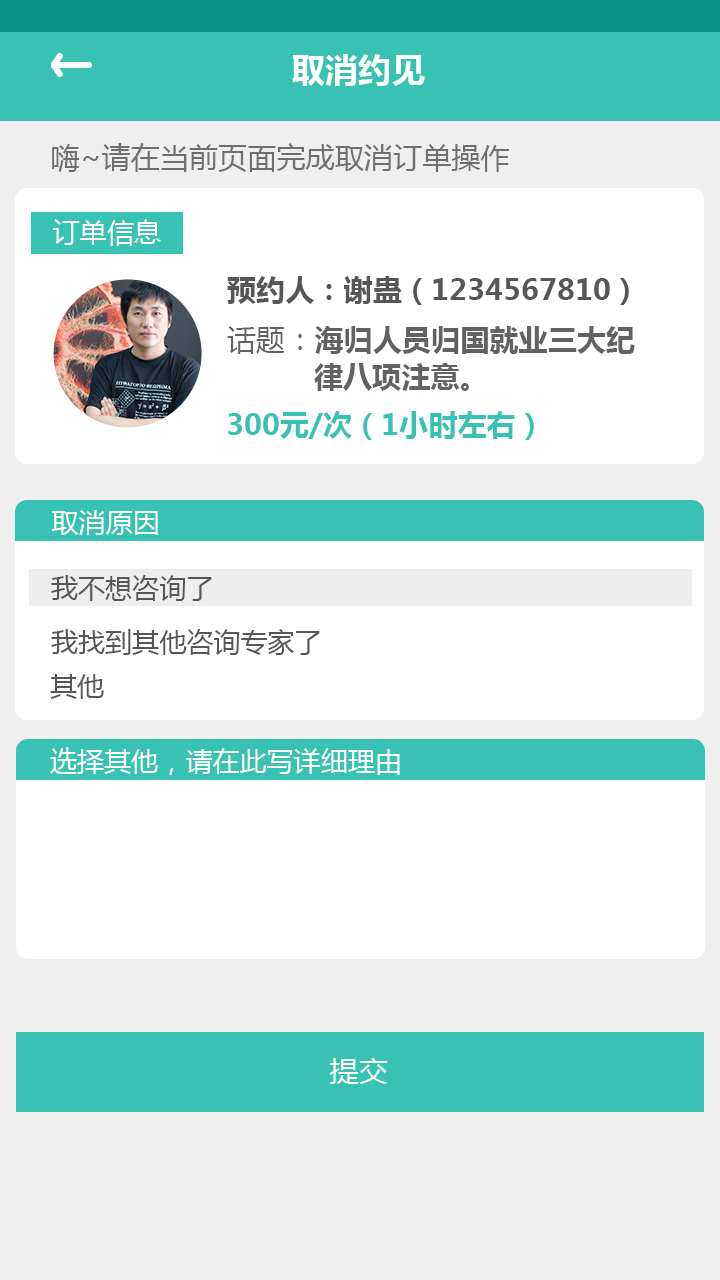
<style>
.page{position:relative;width:720px;height:1280px;background:#ffffff}
.page>*{position:absolute;margin:0}
.t1{font:33.3px "MicrosoftYaHei-Bold";color:#fefefe}
.t2{font:29.2px "MicrosoftYaHei";color:#6e6e6e}
.t3{font:27.1px "MicrosoftYaHei";color:#fefefe}
.t4{font:29.2px "MicrosoftYaHei-Bold";color:#565656}
.t5{font:29.2px/37.5px "MicrosoftYaHei-Bold";color:#626262}
.t6{font:29.2px/37.5px "MicrosoftYaHei";color:#626262}
.t7{font:29.2px "MicrosoftYaHei-Bold";color:#38c2b3}
.t8{font:27.1px "MicrosoftYaHei";color:#565656}
.t9{font:27.1px "MicrosoftYaHei";color:#ffffff}
.t10{font:29.2px "MicrosoftYaHei";color:#fefefe}
</style>
<div class="page">
<p class="t1" style="left:292px;top:54px;width:133px;height:32px">取消约见</p>
<p class="t2" style="left:52px;top:143px;width:457px;height:29px">嗨~请在当前页面完成取消订单操作</p>
<p class="t3" style="left:52px;top:219px;width:109px;height:27px">订单信息</p>
<p class="t4" style="left:227px;top:276px;width:402px;height:29px">预约人：谢蛊（1234567810）</p>
<p class="t5" style="left:227px;top:326px;width:408px;height:65px"><span class="t6">话题：</span>海归人员归国就业三大纪<br>          律八项注意。</p>
<p class="t7" style="left:228px;top:411px;width:306px;height:29px">300元/次（1小时左右）</p>
<p class="t3" style="left:51px;top:510px;width:107px;height:25px">取消原因</p>
<p class="t8" style="left:51px;top:575px;width:161px;height:26px">我不想咨询了</p>
<p class="t8" style="left:51px;top:629px;width:269px;height:26px">我找到其他咨询专家了</p>
<p class="t8" style="left:50px;top:674px;width:54px;height:25px">其他</p>
<p class="t9" style="left:50px;top:747px;width:350px;height:28px">选择其他，请在此写详细理由</p>
<p class="t10" style="left:330px;top:1058px;width:58px;height:26px">提交</p>
</div>
